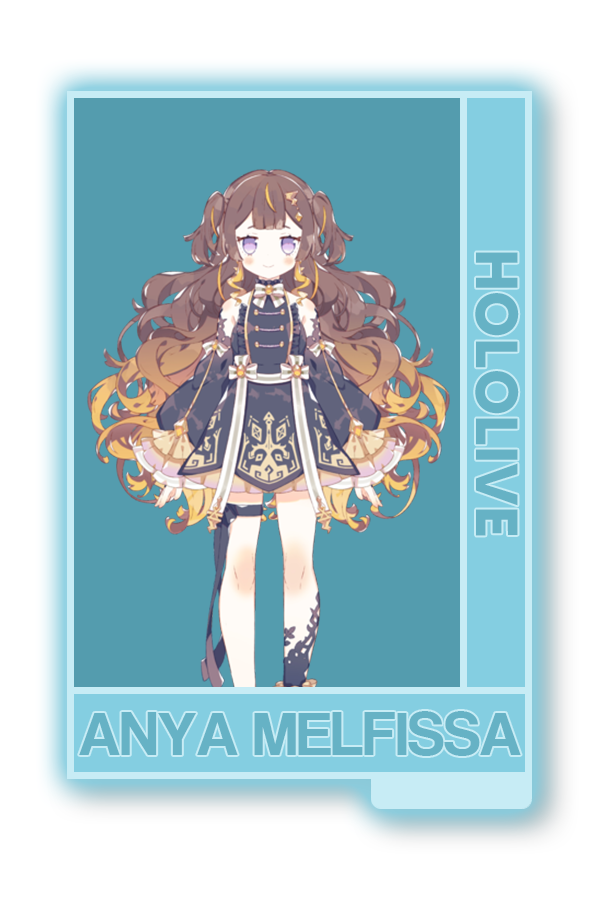
<style>
.page{position:relative;width:600px;height:900px;background:#549cae}
.page>*{position:absolute;margin:0}
.t1{font:59.2px "MADETOMMY-Bold";color:#66b2c5}
.t2{font:63.8px "CoolveticaRg-Regular";color:#66b2c5}
</style>
<div class="page">
<p class="t1" style="left:475px;top:252px;width:44px;height:284px;rotate:90deg">HOLOLIVE</p>
<p class="t2" style="left:79px;top:711px;width:442px;height:45px">ANYA MELFISSA</p>
</div>
